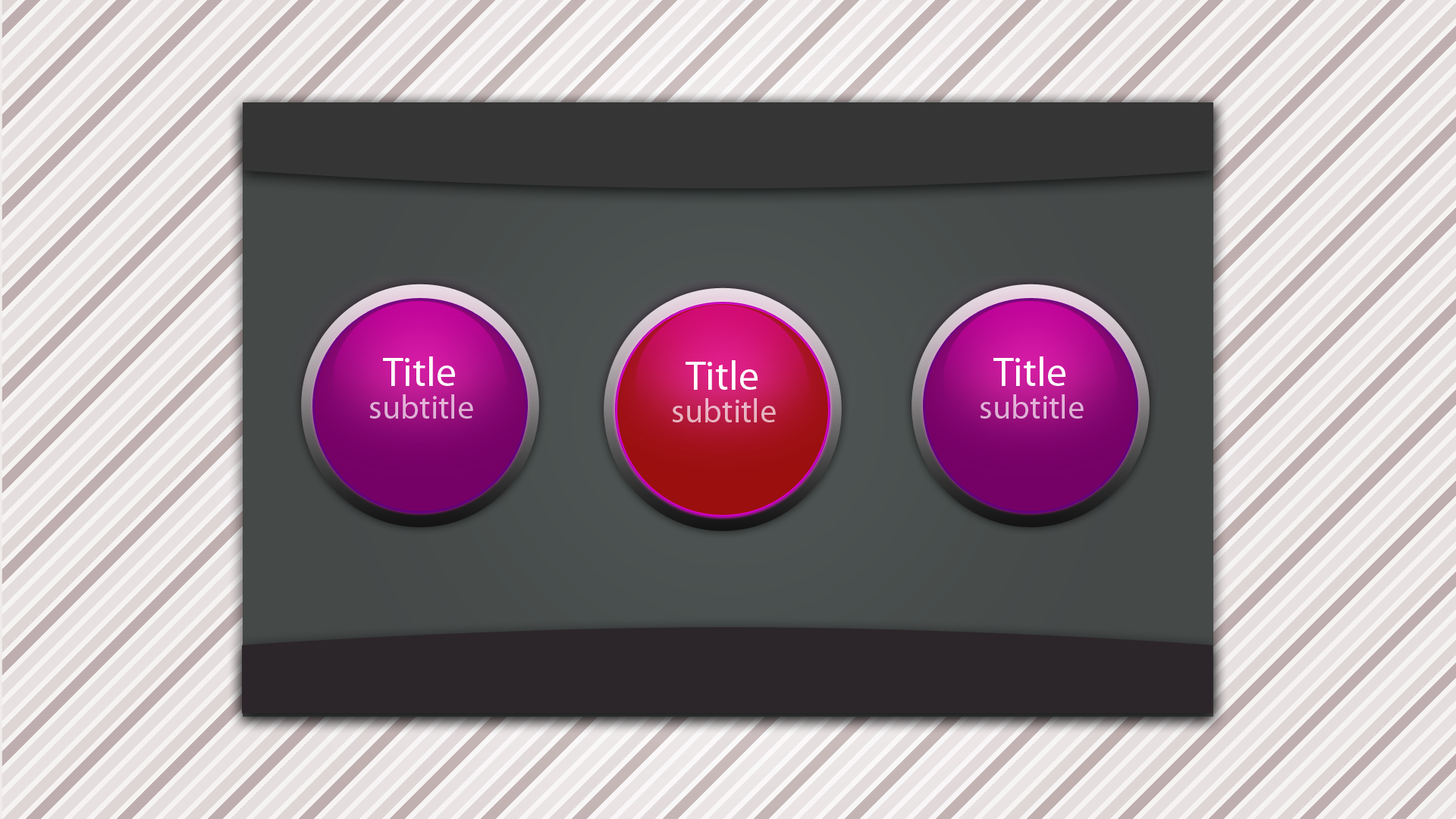
<style>
.page{position:relative;width:1456px;height:819px}
.page>*{position:absolute;margin:0}
.t1{font:40.9px "MyriadPro-Regular";color:#fefefe}
.t2{font:33.4px "MyriadPro-Regular";color:#dfb2d6}
.t3{font:33.4px "MyriadPro-Regular";color:#e8b5c3}
</style>
<div class="page">
<p class="t1" style="left:383px;top:356px;width:72px;height:30px">Title</p>
<p class="t1" style="left:686px;top:360px;width:72px;height:30px">Title</p>
<p class="t1" style="left:993px;top:356px;width:72px;height:30px">Title</p>
<p class="t2" style="left:369px;top:394px;width:104px;height:25px">subtitle</p>
<p class="t3" style="left:672px;top:398px;width:104px;height:24px">subtitle</p>
<p class="t2" style="left:980px;top:394px;width:104px;height:25px">subtitle</p>
</div>
